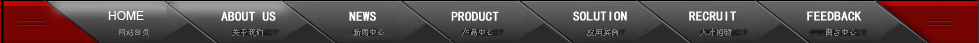
<style>
.page{position:relative;width:979px;height:43px}
.page>*{position:absolute;margin:0}
.t1{font:12px "ArialMT";color:#ffffff;text-transform:uppercase}
.t2{font:13px "SimHei";color:#ffffff;text-transform:uppercase;font-weight:bold}
.t3{font:8px "SimSun";color:#7c7c7c}
.t4{font:8px "SimSun";color:#7c7c7c;text-transform:uppercase}
</style>
<div class="page">
<p class="t1" style="left:108px;top:11px;width:36px;height:9px">Home</p>
<p class="t2" style="left:221px;top:11px;width:55px;height:10px">ABOUT US</p>
<p class="t2" style="left:349px;top:11px;width:27px;height:10px">news</p>
<p class="t2" style="left:451px;top:11px;width:48px;height:10px">PRODUCT</p>
<p class="t2" style="left:573px;top:11px;width:54px;height:10px">SOLUTION</p>
<p class="t2" style="left:689px;top:11px;width:47px;height:10px">RECRUIT</p>
<p class="t2" style="left:807px;top:11px;width:55px;height:10px">FEEDBACK</p>
<p class="t3" style="left:119px;top:29px;width:30px;height:7px">网站首页</p>
<p class="t4" style="left:232px;top:29px;width:31px;height:7px">关于我们</p>
<p class="t4" style="left:353px;top:29px;width:31px;height:7px">新闻中心</p>
<p class="t4" style="left:462px;top:28px;width:31px;height:8px">产品中心</p>
<p class="t4" style="left:587px;top:28px;width:31px;height:8px">应用案例</p>
<p class="t4" style="left:700px;top:28px;width:31px;height:8px">人才招聘</p>
<p class="t4" style="left:826px;top:28px;width:30px;height:8px">留言中心</p>
</div>
